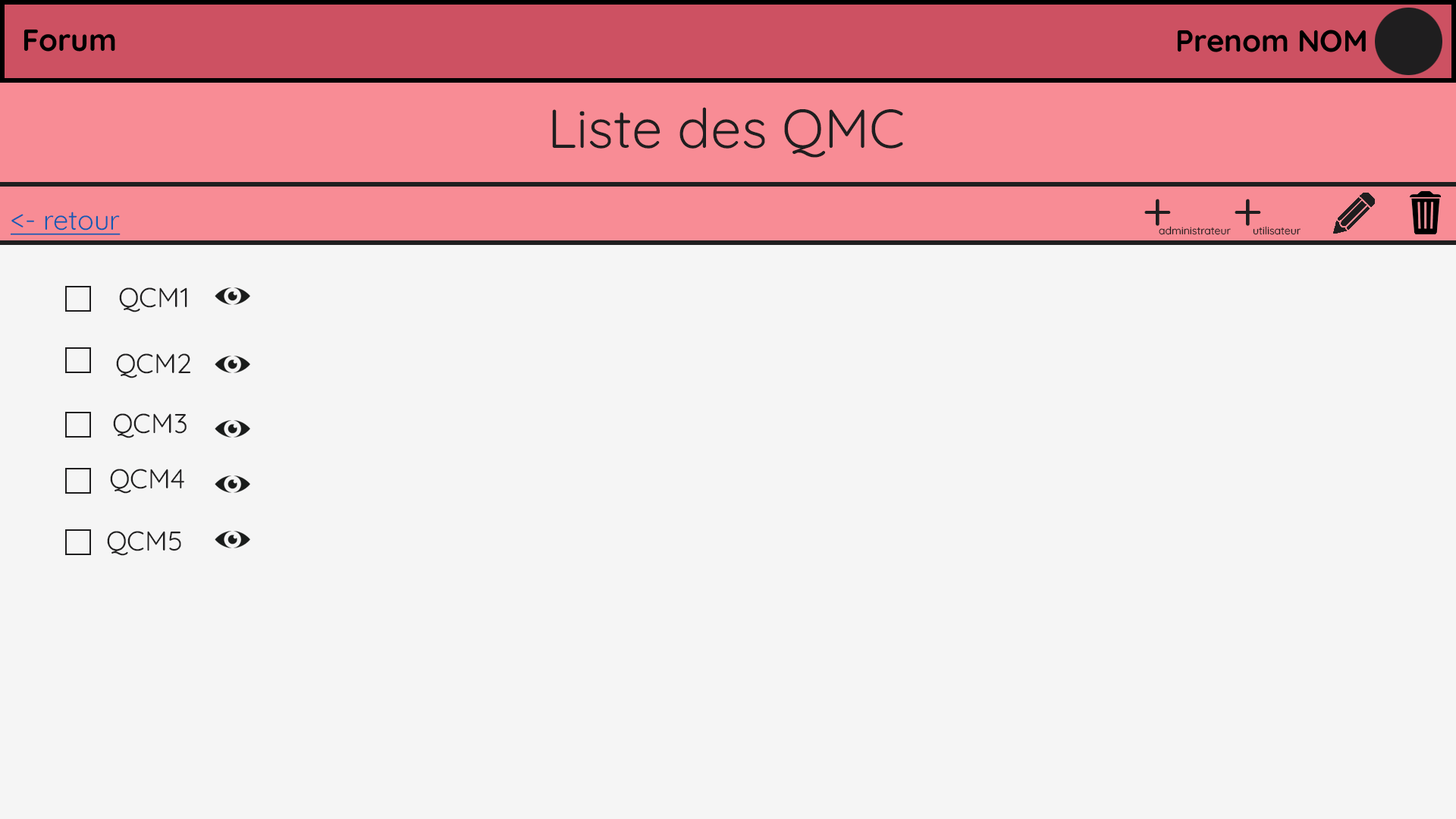
<style>
.page{position:relative;width:1456px;height:819px;background:#f5f5f5}
.page>*{position:absolute;margin:0}
.t1{font:54.6px "Quicksand-Regular";color:#1f1e1f}
.t2{font:27.3px "Quicksand-Regular";color:#145bb2;text-decoration:underline}
.t3{font:10.6px "Quicksand-Regular";color:#1f1e1f}
.t4{font:27.3px "Quicksand-Regular";color:#1f1e1f}
</style>
<div class="page">
<p class="t1" style="left:552px;top:107px;width:351px;height:51px">Liste des QMC</p>
<p class="t1" style="left:1144px;top:199px;width:117px;height:27px">+    +</p>
<p class="t2" style="left:11px;top:212px;width:110px;height:23px">&lt;- retour</p>
<p class="t3" style="left:1159px;top:226px;width:72px;height:9px">administrateur</p>
<p class="t3" style="left:1253px;top:226px;width:48px;height:9px">utilisateur</p>
<p class="t4" style="left:119px;top:287px;width:68px;height:25px">QCM1</p>
<p class="t4" style="left:116px;top:353px;width:74px;height:25px">QCM2</p>
<p class="t4" style="left:113px;top:413px;width:74px;height:25px">QCM3</p>
<p class="t4" style="left:110px;top:469px;width:74px;height:25px">QCM4</p>
<p class="t4" style="left:107px;top:531px;width:74px;height:25px">QCM5</p>
</div>
